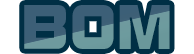
<style>
.page{position:relative;width:194px;height:54px;background:#002f45}
.page>*{position:absolute;margin:0}
.t1{font:69.3px "DFSoGeiStd-W9";scale:0.92 1}
</style>
<div class="page">
<p class="t1" style="left:24px;top:5px;width:146px;height:44px">BOM</p>
</div>
